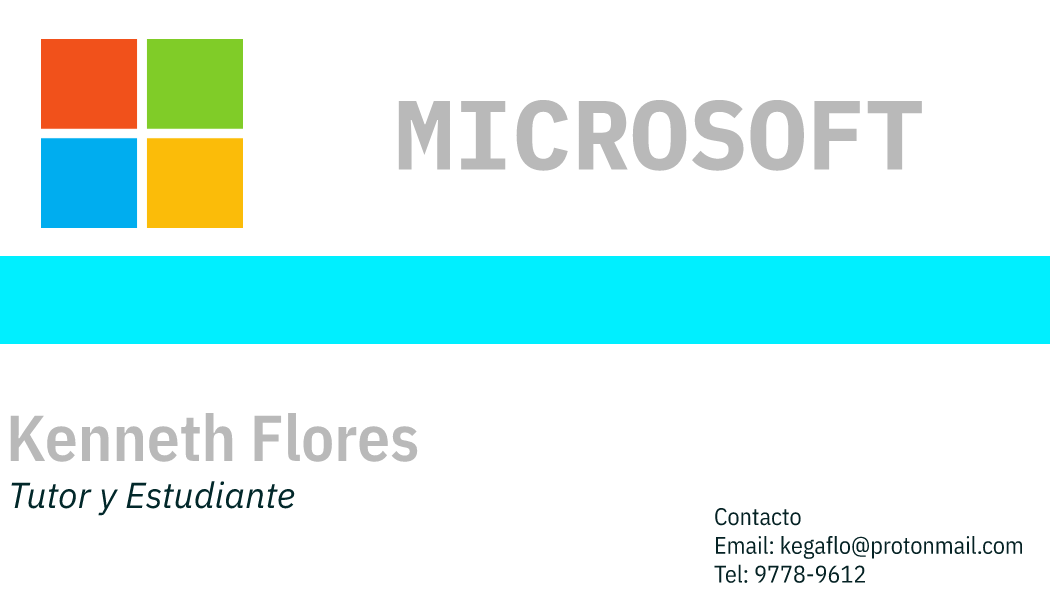
<style>
.page{position:relative;width:1050px;height:600px;background:#ffffff}
.page>*{position:absolute;margin:0}
.t1{font:98px "IBMPlexMono-Bold";color:#b9b9b9}
.t2{font:65px "IBMPlexSansCond-SemiBold";color:#b9b9b9}
.t3{font:36px "IBMPlexSans-Italic";color:#02282a}
.t4{font:24px "IBMPlexSansCond";color:#052224}
</style>
<div class="page">
<p class="t1" style="left:398px;top:99px;width:524px;height:72px">MICROSOFT</p>
<p class="t2" style="left:10px;top:412px;width:408px;height:50px">Kenneth Flores</p>
<p class="t3" style="left:11px;top:481px;width:284px;height:35px">Tutor y Estudiante</p>
<p class="t4" style="left:714px;top:507px;width:309px;height:76px">Contacto<br>Email: kegaflo@protonmail.com<br>Tel: 9778-9612</p>
</div>
